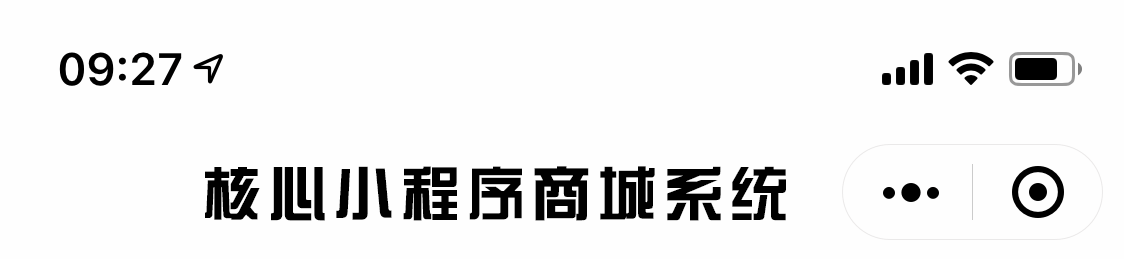
<style>
.page{position:relative;width:1124px;height:259px;background:#fefefe}
.page>*{position:absolute;margin:0}
.t1{font:60px "FZZYJW--GB1-0";letter-spacing:0.1em;color:#000000}
</style>
<div class="page">
<p class="t1" style="left:205px;top:166px;width:581px;height:55px">核心小程序商城系统</p>
</div>
